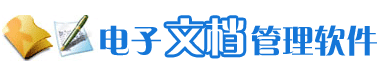
<style>
.page{position:relative;width:380px;height:72px;background:#ffffff}
.page>*{position:absolute;margin:0}
.t1{font:32px "FZCQJW--GB1-0";color:#1476d8}
.t2{font:40px "FZCQJW--GB1-0";color:#ffffff}
</style>
<div class="page">
<p class="t1" style="left:100px;top:25px;width:277px;height:31px">电子         管理软件</p>
<p class="t2" style="left:166px;top:18px;width:78px;height:38px">文档</p>
</div>
